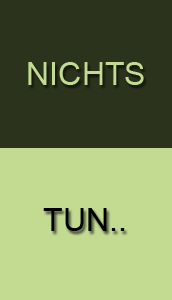
<style>
.page{position:relative;width:172px;height:300px;background:#c2db91}
.page>*{position:absolute;margin:0}
.t1{font:32.1px "ArialMT";color:#c2db91}
.t2{font:32.1px "ArialMT";color:#000000}
</style>
<div class="page">
<p class="t1" style="left:28px;top:62px;width:116px;height:23px">NICHTS</p>
<p class="t2" style="left:43px;top:208px;width:82px;height:23px">TUN..</p>
</div>
